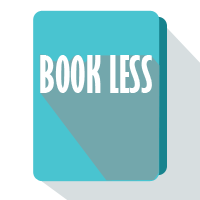
<style>
.page{position:relative;width:200px;height:200px;background:#ffffff}
.page>*{position:absolute;margin:0}
.t1{font:48px "GillSansMT-ExtraCondensedBold";color:#ffffff;text-transform:uppercase}
</style>
<div class="page">
<p class="t1" style="left:40px;top:55px;width:112px;height:38px">Book Less</p>
</div>
